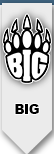
<style>
.page{position:relative;width:54px;height:154px;background:#ebebeb}
.page>*{position:absolute;margin:0}
.t1{font:12.5px "Arial-Black";letter-spacing:-0.01em;color:#000000}
</style>
<div class="page">
<p class="t1" style="left:15px;top:104px;width:24px;height:10px">BIG</p>
</div>
